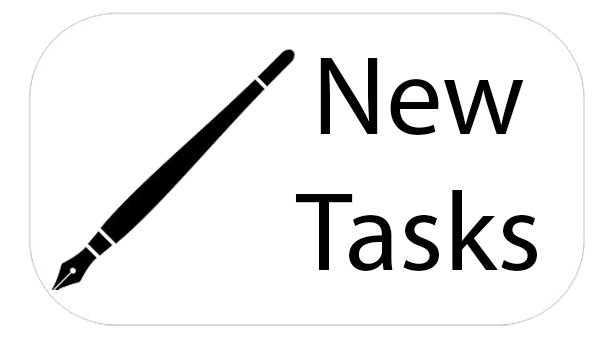
<style>
.page{position:relative;width:614px;height:338px;background:#ffffff}
.page>*{position:absolute;margin:0}
.t1{font:112.6px "MyriadPro-Regular";color:#000000}
</style>
<div class="page">
<p class="t1" style="left:295px;top:58px;width:242px;height:213px;text-align:center">New<br>Tasks</p>
</div>
